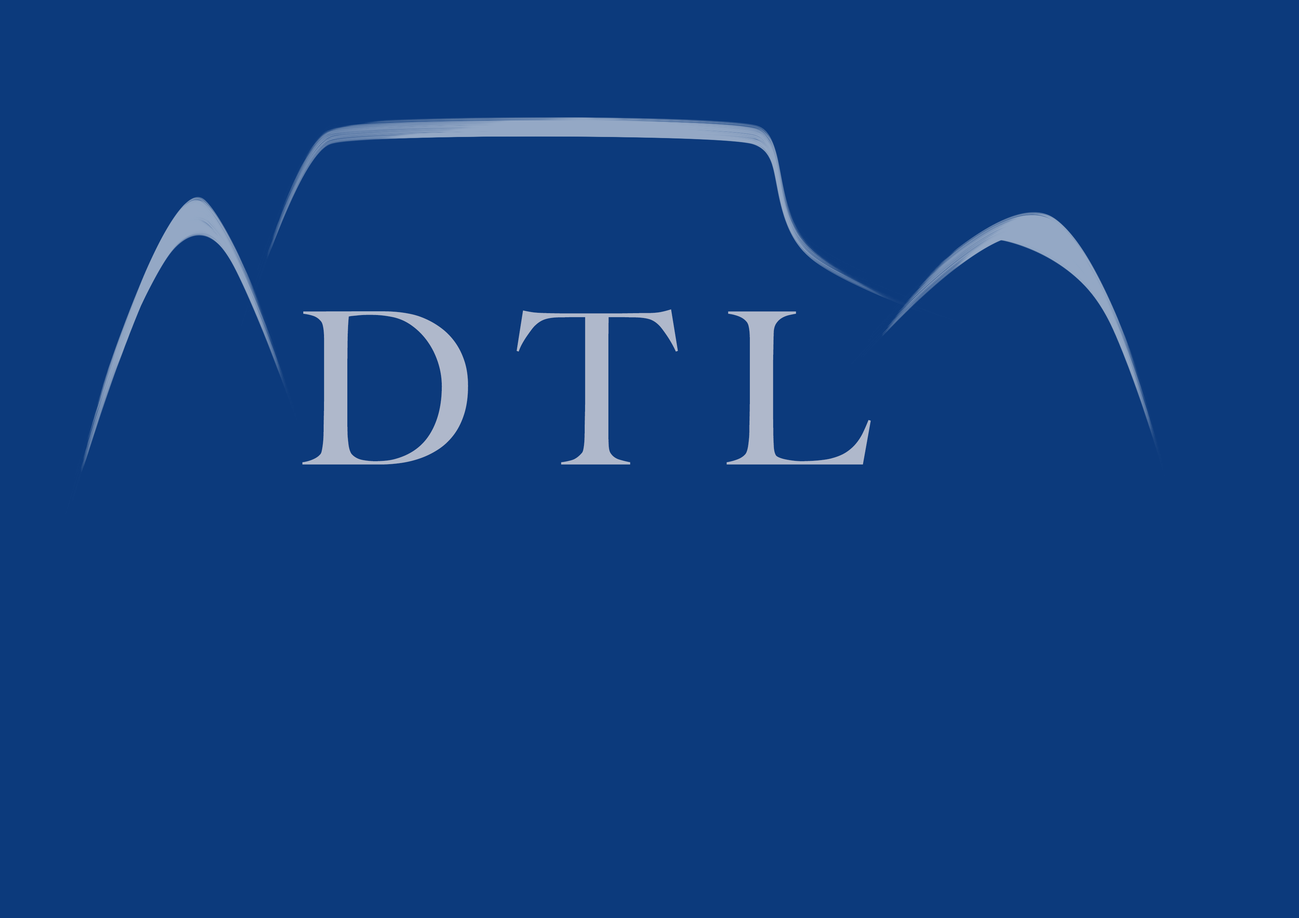
<style>
.page{position:relative;width:1299px;height:918px;background:#0c3a7c}
.page>*{position:absolute;margin:0}
.t1{font:212.3px "BigCaslon-Medium";color:#afb8cb}
</style>
<div class="page">
<p class="t1" style="left:302px;top:309px;width:569px;height:156px">D T L</p>
</div>
